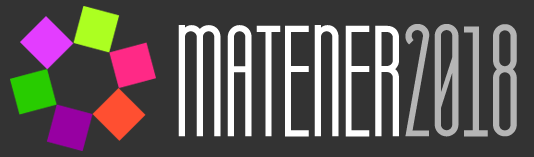
<style>
.page{position:relative;width:534px;height:157px;background:#333333}
.page>*{position:absolute;margin:0}
.t1{font:151.5px "Komoda-Regular";color:#ffffff}
.t2{font:151.5px "Komoda-Regular";color:#b5b5b5}
</style>
<div class="page">
<p class="t1" style="left:178px;top:24px;width:339px;height:113px">maTENER<span class="t2">2018</span></p>
</div>
